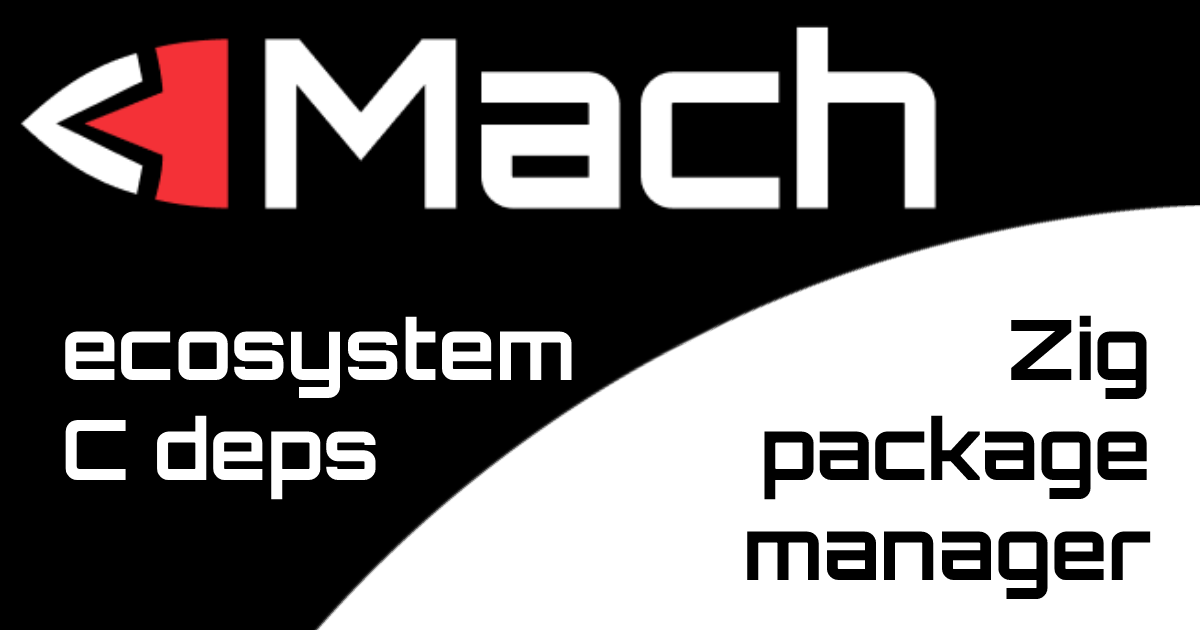
<style>
.page{position:relative;width:1200px;height:630px;background:#000000}
.page>*{position:absolute;margin:0}
.t1{font:83.4px "Orbitron-Bold";color:#ffffff}
.t2{font:83.4px "Orbitron-Bold";color:#000000}
</style>
<div class="page">
<p class="t1" style="left:65px;top:316px;width:507px;height:184px">ecosystem<br>C deps</p>
<p class="t2" style="left:747px;top:315px;width:404px;height:285px;text-align:right">Zig<br>package<br>manager</p>
</div>
